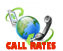
<style>
.page{position:relative;width:63px;height:51px;background:#ffffff}
.page>*{position:absolute;margin:0}
.t1{font:9.2px "GillSans-UltraBoldCondensed";color:#e72a05;text-transform:uppercase;font-weight:bold}
</style>
<div class="page">
<p class="t1" style="left:6px;top:42px;width:50px;height:8px">Call Rates</p>
</div>
